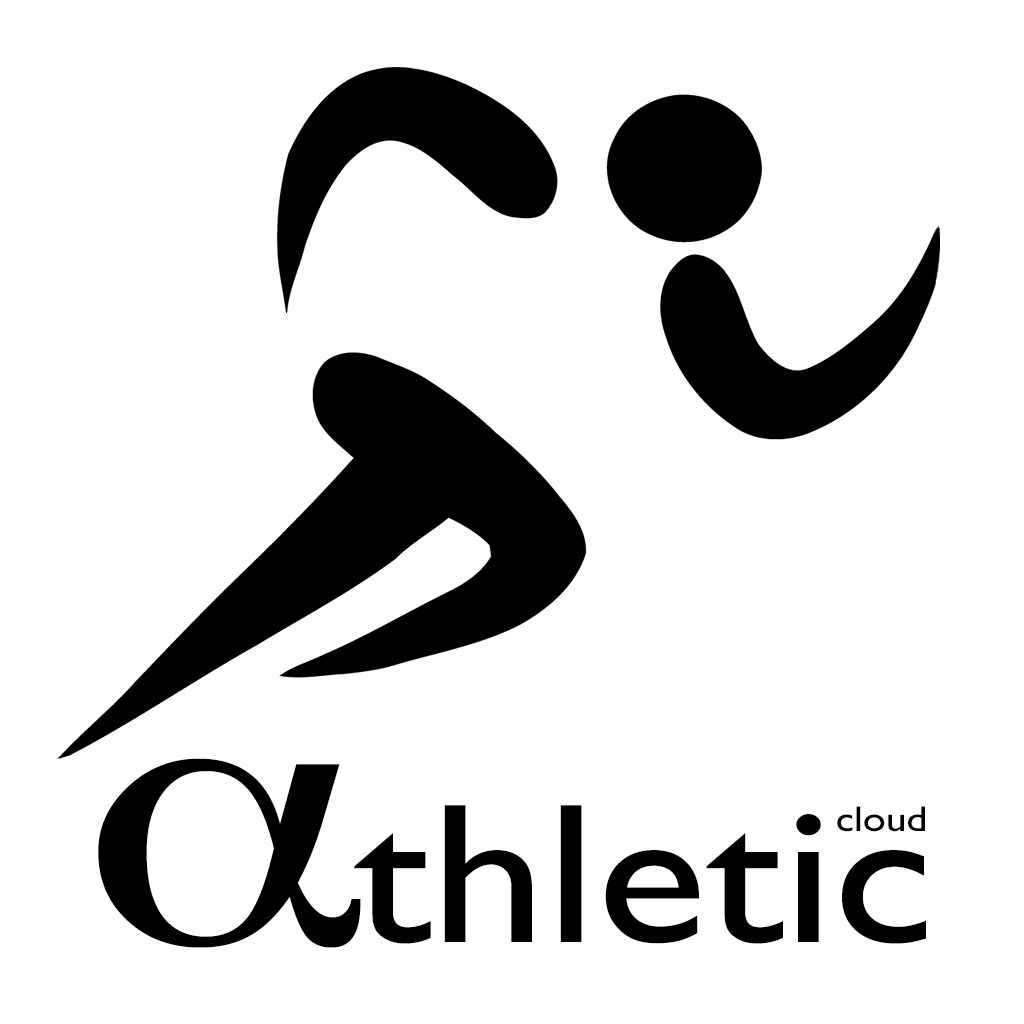
<style>
.page{position:relative;width:1024px;height:1024px;background:#ffffff}
.page>*{position:absolute;margin:0}
.t1{font:200px "GillSans";color:#000000;scale:1.15 1}
.t2{font:36px "GillSans";color:#000000;scale:1.15 1}
</style>
<div class="page">
<p class="t1" style="left:354px;top:805px;width:572px;height:139px">thletic</p>
<p class="t2" style="left:837px;top:806px;width:88px;height:26px">cloud</p>
</div>
